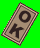
<style>
.page{position:relative;width:40px;height:48px;background:#00ff00}
.page>*{position:absolute;margin:0}
.t1{font:15.9px "Arial-Black";color:#312121}
</style>
<div class="page">
<p class="t1" style="left:8px;top:10px;width:23px;height:29px;rotate:32deg">OK</p>
</div>
